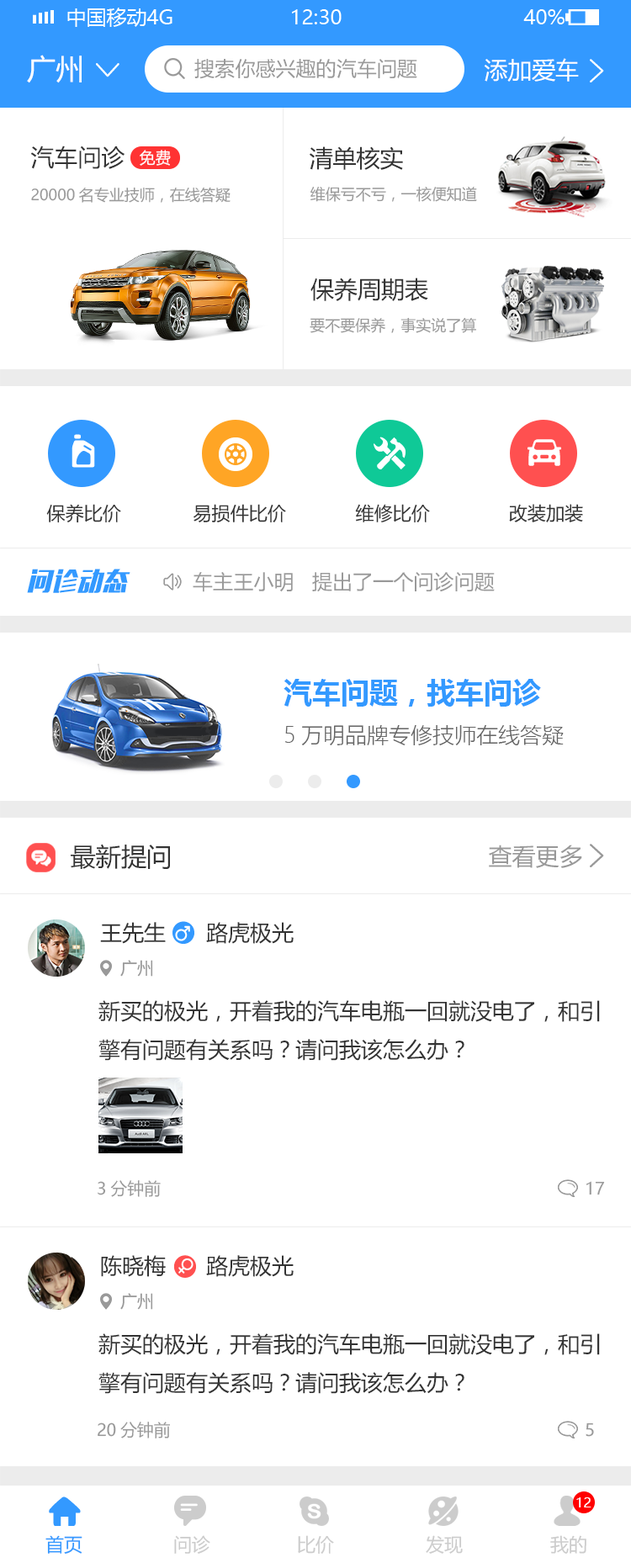
<style>
.page{position:relative;width:631px;height:1568px;background:#ffffff}
.page>*{position:absolute;margin:0}
.t1{font:28.6px "MicrosoftYaHei";color:#ffffff}
.t2{font:20.2px "MicrosoftYaHei";color:#999999}
.t3{font:23.6px "MicrosoftYaHei";color:#ffffff}
.t4{font:23.6px "MicrosoftYaHei";color:#333333}
.t5{font:15.7px "MicrosoftYaHei";color:#ffffff}
.t6{font:15.1px "MicrosoftYaHei";color:#999999}
.t7{font:18.5px "MicrosoftYaHei";color:#333333}
.t8{font:28.6px "MicrosoftYaHei-Bold";color:#3399ff}
.t9{font:21.9px "MicrosoftYaHeiLight";color:#666666}
.t10{font:25.2px "MicrosoftYaHei";color:#333333}
.t11{font:23.6px "MicrosoftYaHei";color:#999999}
.t12{font:21.9px "MicrosoftYaHei";color:#333333}
.t13{font:16.8px "MicrosoftYaHei";color:#999999}
.t14{font:13.5px "MicrosoftYaHei";color:#ffffff}
.t15{font:18.5px "MicrosoftYaHei";color:#3399ff}
.t16{font:18.5px "MicrosoftYaHei";color:#cccccc}
</style>
<div class="page">
<p class="t1" style="left:27px;top:55px;width:55px;height:28px">广州</p>
<p class="t2" style="left:194px;top:59px;width:223px;height:20px">搜索你感兴趣的汽车问题</p>
<p class="t3" style="left:484px;top:58px;width:95px;height:24px">添加爱车</p>
<p class="t4" style="left:30px;top:146px;width:94px;height:23px">汽车问诊</p>
<p class="t5" style="left:140px;top:150px;width:31px;height:16px">免费</p>
<p class="t4" style="left:310px;top:146px;width:93px;height:24px">清单核实</p>
<p class="t6" style="left:310px;top:186px;width:167px;height:16px">维保亏不亏，一核便知道</p>
<p class="t6" style="left:31px;top:187px;width:199px;height:16px">20000名专业技师，在线答疑</p>
<p class="t4" style="left:310px;top:278px;width:118px;height:23px">保养周期表</p>
<p class="t6" style="left:310px;top:317px;width:166px;height:16px">要不要保养，事实说了算</p>
<p class="t7" style="left:46px;top:504px;width:75px;height:19px">保养比价</p>
<p class="t7" style="left:193px;top:504px;width:93px;height:18px">易损件比价</p>
<p class="t7" style="left:355px;top:504px;width:75px;height:18px">维修比价</p>
<p class="t7" style="left:509px;top:504px;width:74px;height:18px">改装加装</p>
<p class="t2" style="left:193px;top:572px;width:302px;height:20px">车主王小明   提出了一个问诊问题</p>
<p class="t8" style="left:283px;top:679px;width:258px;height:28px">汽车问题，找车问诊</p>
<p class="t9" style="left:285px;top:725px;width:279px;height:20px">5万明品牌专修技师在线答疑</p>
<p class="t10" style="left:71px;top:844px;width:99px;height:25px">最新提问</p>
<p class="t11" style="left:489px;top:845px;width:93px;height:23px">查看更多</p>
<p class="t12" style="left:100px;top:922px;width:66px;height:22px">王先生</p>
<p class="t12" style="left:206px;top:922px;width:88px;height:22px">路虎极光</p>
<p class="t13" style="left:120px;top:960px;width:33px;height:17px">广州</p>
<p class="t12" style="left:98px;top:1000px;width:502px;height:61px">新买的极光，开着我的汽车电瓶一回就没电了，和引<br>擎有问题有关系吗？请问我该怎么办？</p>
<p class="t13" style="left:98px;top:1180px;width:63px;height:17px">3分钟前</p>
<p class="t13" style="left:586px;top:1181px;width:19px;height:14px">17</p>
<p class="t12" style="left:101px;top:1255px;width:65px;height:22px">陈晓梅</p>
<p class="t12" style="left:206px;top:1255px;width:88px;height:22px">路虎极光</p>
<p class="t13" style="left:120px;top:1293px;width:33px;height:17px">广州</p>
<p class="t12" style="left:98px;top:1333px;width:502px;height:61px">新买的极光，开着我的汽车电瓶一回就没电了，和引<br>擎有问题有关系吗？请问我该怎么办？</p>
<p class="t13" style="left:98px;top:1422px;width:72px;height:16px">20分钟前</p>
<p class="t13" style="left:585px;top:1422px;width:9px;height:15px">5</p>
<p class="t14" style="left:576px;top:1497px;width:15px;height:10px">12</p>
<p class="t15" style="left:45px;top:1535px;width:37px;height:19px">首页</p>
<p class="t16" style="left:174px;top:1535px;width:36px;height:19px">问诊</p>
<p class="t16" style="left:298px;top:1535px;width:36px;height:19px">比价</p>
<p class="t16" style="left:426px;top:1535px;width:37px;height:19px">发现</p>
<p class="t16" style="left:550px;top:1535px;width:36px;height:19px">我的</p>
</div>
